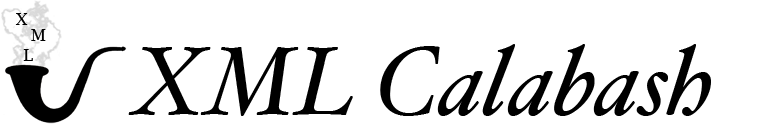
<style>
.page{position:relative;width:775px;height:128px;background:#ffffff}
.page>*{position:absolute;margin:0}
.t1{font:96px "HoeflerText-Italic";color:#000000}
</style>
<div class="page">
<p class="t1" style="left:128px;top:44px;width:583px;height:72px">XML Calabash</p>
</div>
